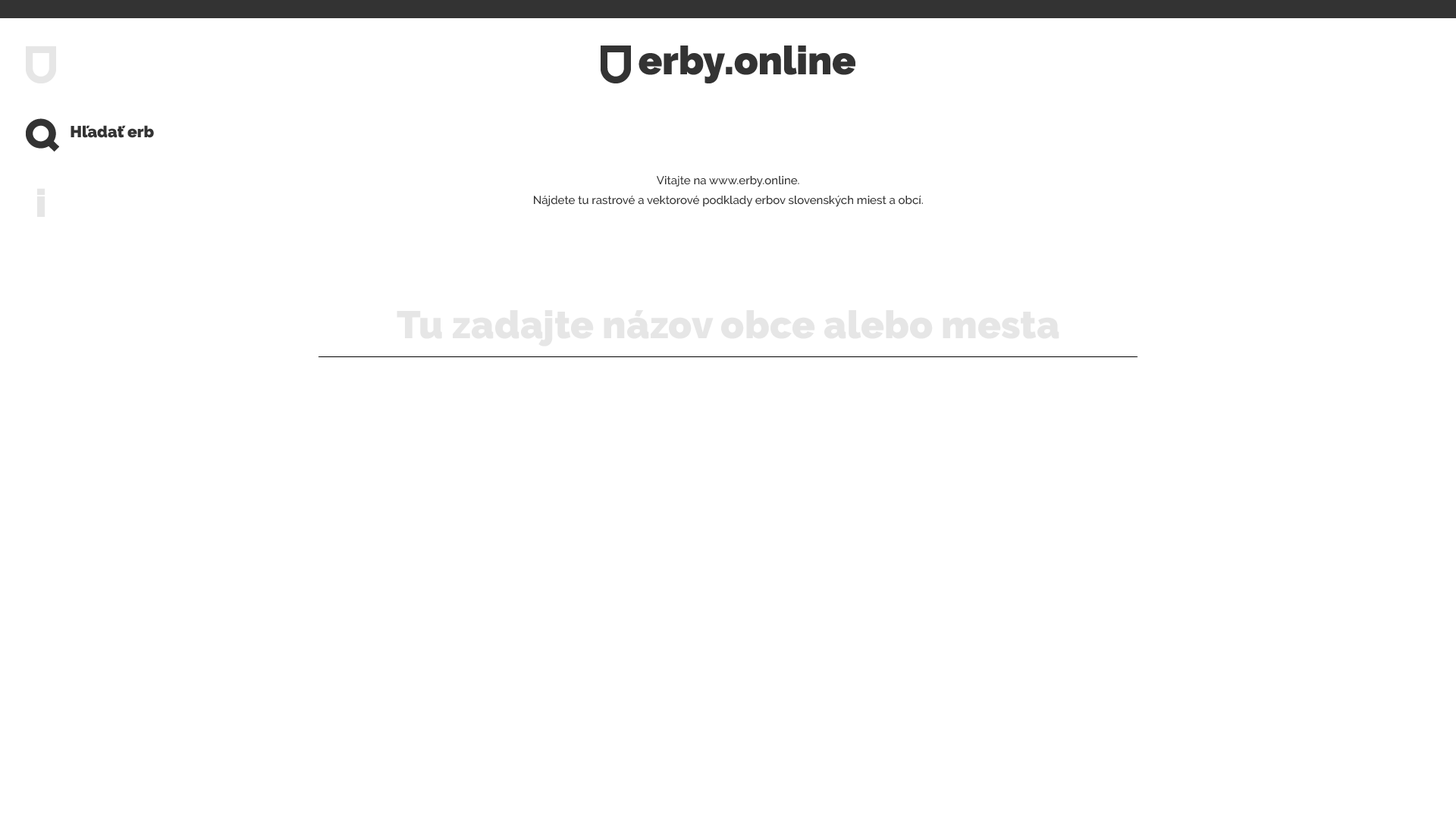
<style>
.page{position:relative;width:1456px;height:819px;background:#ffffff}
.page>*{position:absolute;margin:0}
.t1{font:15.9px "Raleway-Black";color:#333333}
.t2{font:11.4px/19.7px "Raleway-Medium";color:#333333}
.t3{font:38.6px "Raleway-Black";color:#e6e6e6}
</style>
<div class="page">
<p class="t1" style="left:71px;top:125px;width:83px;height:13px">Hľadať erb</p>
<p class="t2" style="left:534px;top:176px;width:389px;height:31px;text-align:center">Vitajte na www.erby.online. <br>Nájdete tu rastrové a vektorové podklady erbov slovenských miest a obcí.</p>
<p class="t3" style="left:397px;top:310px;width:662px;height:37px">Tu zadajte názov obce alebo mesta</p>
</div>
